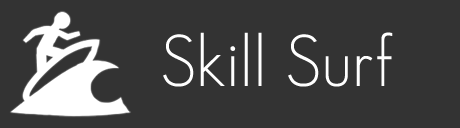
<style>
.page{position:relative;width:460px;height:128px;background:#333333}
.page>*{position:absolute;margin:0}
.t1{font:72px "GeosansLight";color:#ffffff}
</style>
<div class="page">
<p class="t1" style="left:163px;top:32px;width:230px;height:55px">Skill Surf</p>
</div>
